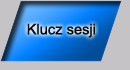
<style>
.page{position:relative;width:130px;height:70px;background:#c6c3c6}
.page>*{position:absolute;margin:0}
.t1{font:14.7px "ArialMT";color:#000000}
</style>
<div class="page">
<p class="t1" style="left:27px;top:23px;width:68px;height:15px">Klucz sesji</p>
</div>
